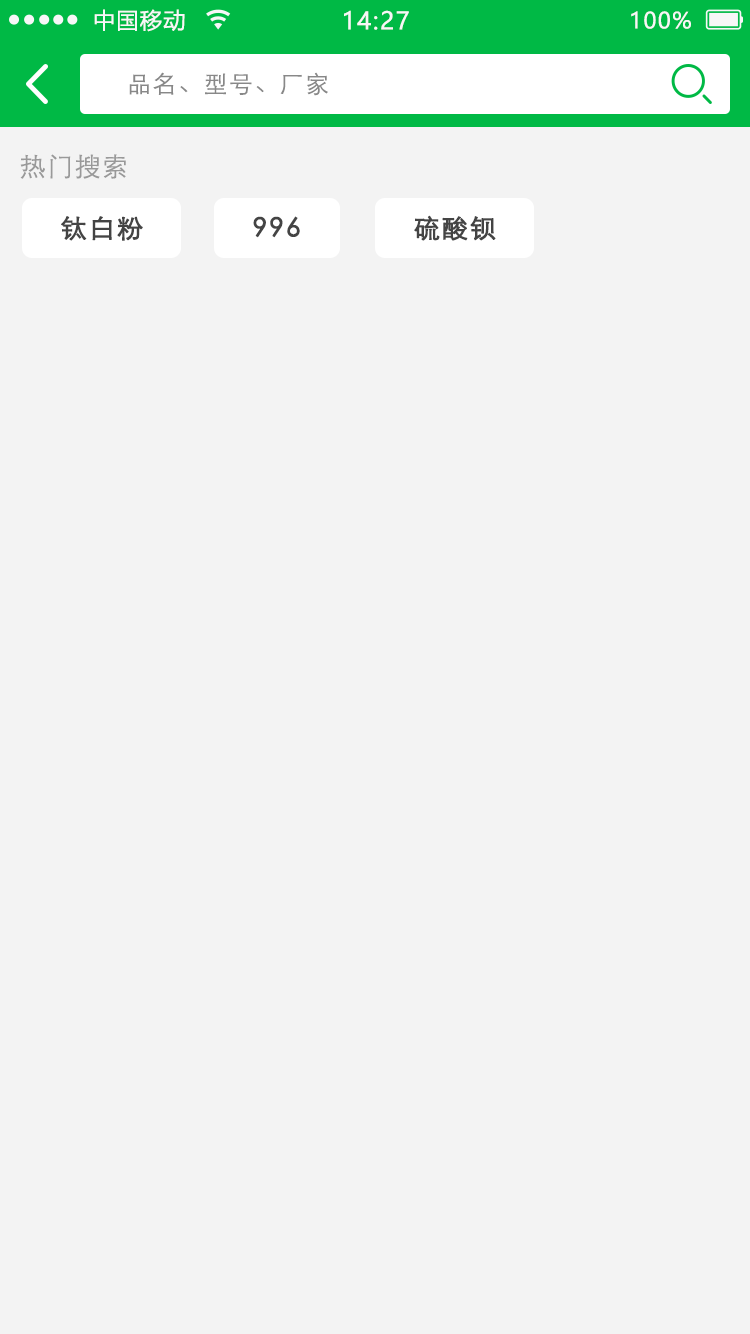
<style>
.page{position:relative;width:750px;height:1334px;background:#f3f3f3}
.page>*{position:absolute;margin:0}
.t1{font:22px "MicrosoftYaHei";letter-spacing:0.06em;color:#f7f7f7}
.t2{font:24px "MicrosoftYaHei";letter-spacing:0.06em;color:#f7f7f7}
.t3{font:24px "STXihei";letter-spacing:0.06em;color:#888888}
.t4{font:25.9px "STXihei";letter-spacing:0.06em;color:#999999}
.t5{font:25.9px "STXihei";letter-spacing:0.06em;color:#444444;font-weight:bold}
</style>
<div class="page">
<p class="t1" style="left:94px;top:9px;width:91px;height:23px">中国移动</p>
<p class="t2" style="left:344px;top:10px;width:65px;height:20px">14:27</p>
<p class="t1" style="left:631px;top:11px;width:60px;height:18px">100%</p>
<p class="t3" style="left:129px;top:72px;width:199px;height:24px">品名、型号、厂家</p>
<p class="t4" style="left:20px;top:154px;width:106px;height:25px">热门搜索</p>
<p class="t5" style="left:61px;top:216px;width:82px;height:25px">钛白粉</p>
<p class="t5" style="left:253px;top:216px;width:47px;height:22px">996</p>
<p class="t5" style="left:414px;top:215px;width:82px;height:26px">硫酸钡</p>
</div>
